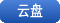
<style>
.page{position:relative;width:60px;height:23px}
.page>*{position:absolute;margin:0}
.t1{font:15px "SimHei";color:#ffffff;font-weight:bold;scale:0.85 1}
</style>
<div class="page">
<p class="t1" style="left:17px;top:3px;width:26px;height:15px">云盘</p>
</div>
